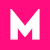
<style>
.page{position:relative;width:50px;height:50px;background:#ff0d7e}
.page>*{position:absolute;margin:0}
.t1{font:36px "ArcaMajora3-Heavy";color:#fffefe;font-weight:bold}
</style>
<div class="page">
<p class="t1" style="left:10px;top:9px;width:30px;height:31px">M</p>
</div>
